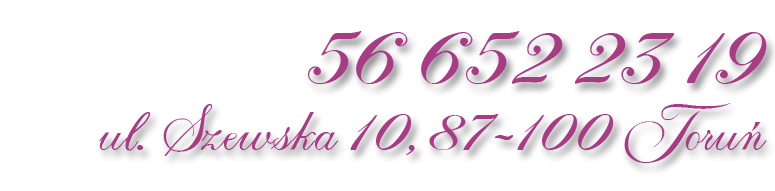
<style>
.page{position:relative;width:775px;height:191px;background:#ffffff}
.page>*{position:absolute;margin:0}
.t1{font:83.3px "EFNAbsolut";letter-spacing:0.005em;color:#a73b84}
.t2{font:58.3px "EFNAbsolut";letter-spacing:0.005em;color:#a73b84}
</style>
<div class="page">
<p class="t1" style="left:308px;top:31px;width:459px;height:53px">56 652 23 19</p>
<p class="t2" style="left:99px;top:103px;width:668px;height:60px">ul. Szewska 10, 87-100 Toruń</p>
</div>
